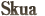
<style>
.page{position:relative;width:45px;height:16px;background:#ffffff}
.page>*{position:absolute;margin:0}
.t1{font:18px "RyuminPro-ExBold";letter-spacing:-0.06em;color:#4a3f32;font-weight:bold;scale:0.9 1}
</style>
<div class="page">
<p class="t1" style="left:1px;top:1px;width:37px;height:15px">Skua</p>
</div>
